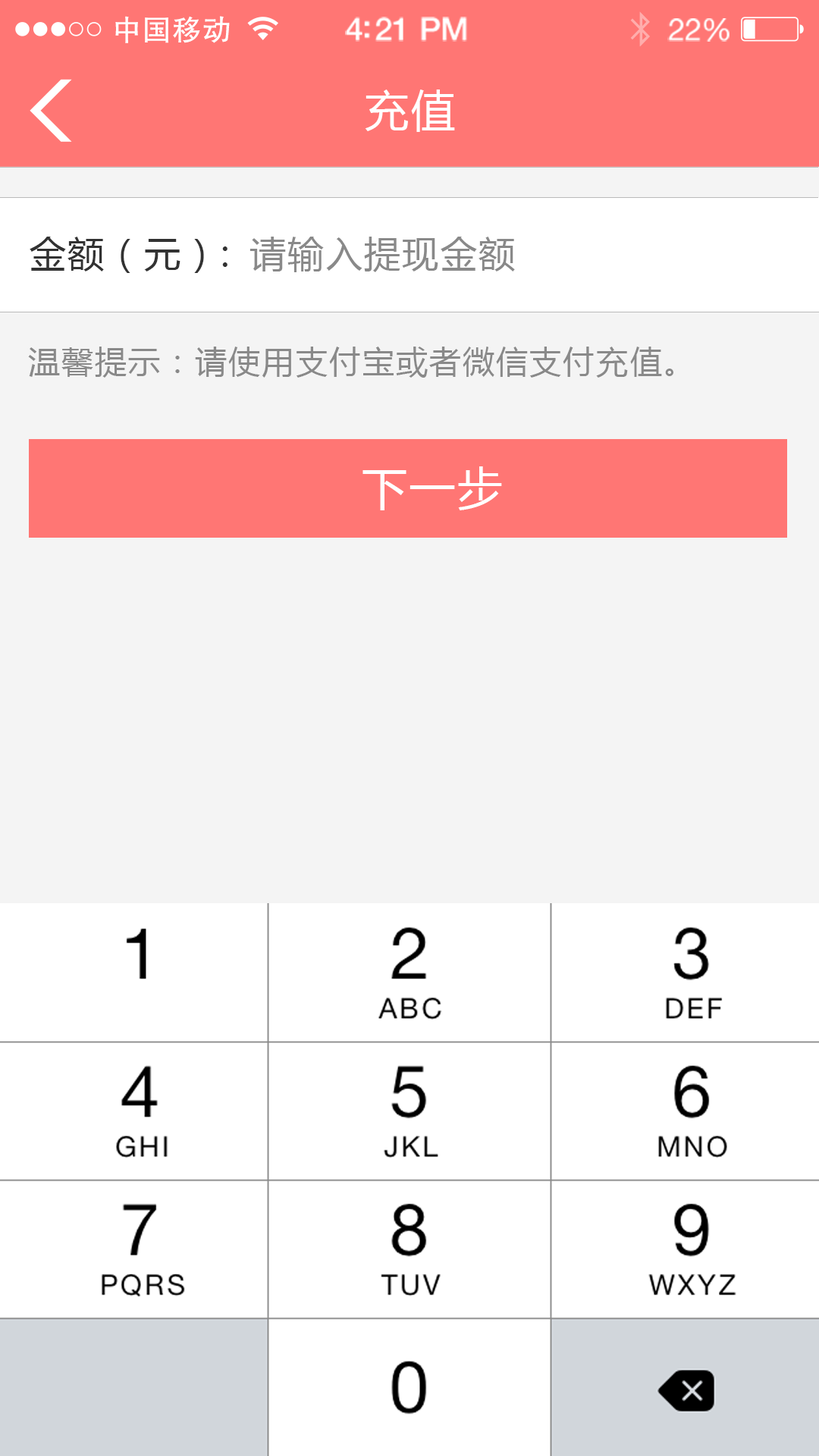
<style>
.page{position:relative;width:819px;height:1456px;background:#ffffff}
.page>*{position:absolute;margin:0}
.t1{font:29.4px "FZHTJW--GB1-0";letter-spacing:0.02em;color:#ffffff}
.t2{font:32px "HelveticaNeue-Medium";letter-spacing:-0.02em;color:#ffffff}
.t3{font:30.7px "HelveticaNeue";letter-spacing:-0.02em;color:#ffffff}
.t4{font:44px "MicrosoftYaHei";letter-spacing:0.05em;color:#ffffff}
.t5{font:36.4px "MicrosoftYaHei";letter-spacing:0.05em;color:#323232}
.t6{font:36.4px "MicrosoftYaHei";letter-spacing:0.05em;color:#898989}
.t7{font:31.8px "MicrosoftYaHei";letter-spacing:0.05em;color:#898989}
.t8{font:45.5px "MicrosoftYaHei";letter-spacing:0.05em;color:#ffffff}
</style>
<div class="page">
<p class="t1" style="left:115px;top:16px;width:115px;height:27px">中国移动</p>
<p class="t2" style="left:345px;top:17px;width:122px;height:25px">4:21 PM</p>
<p class="t3" style="left:667px;top:18px;width:63px;height:24px">22%</p>
<p class="t4" style="left:365px;top:89px;width:90px;height:43px">充值</p>
<p class="t5" style="left:30px;top:237px;width:197px;height:36px">金额（元）:</p>
<p class="t6" style="left:249px;top:237px;width:266px;height:35px">请输入提现金额</p>
<p class="t7" style="left:28px;top:347px;width:645px;height:31px">温馨提示：请使用支付宝或者微信支付充值。</p>
<p class="t8" style="left:362px;top:466px;width:140px;height:44px">下一步</p>
</div>
